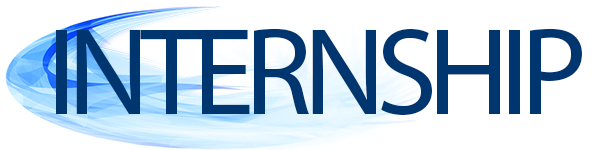
<style>
.page{position:relative;width:600px;height:150px;background:#ffffff}
.page>*{position:absolute;margin:0}
.t1{font:125px "MyriadPro-Regular";letter-spacing:-0.075em;color:#00366f;text-transform:uppercase}
</style>
<div class="page">
<p class="t1" style="left:56px;top:28px;width:526px;height:87px">INTERNSHIP</p>
</div>
